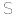
<style>
.page{position:relative;width:16px;height:16px;background:#ffffff}
.page>*{position:absolute;margin:0}
.t1{font:16.8px "Montserrat-Thin"}
</style>
<div class="page">
<p class="t1" style="left:4px;top:2px;width:8px;height:12px">S</p>
</div>
